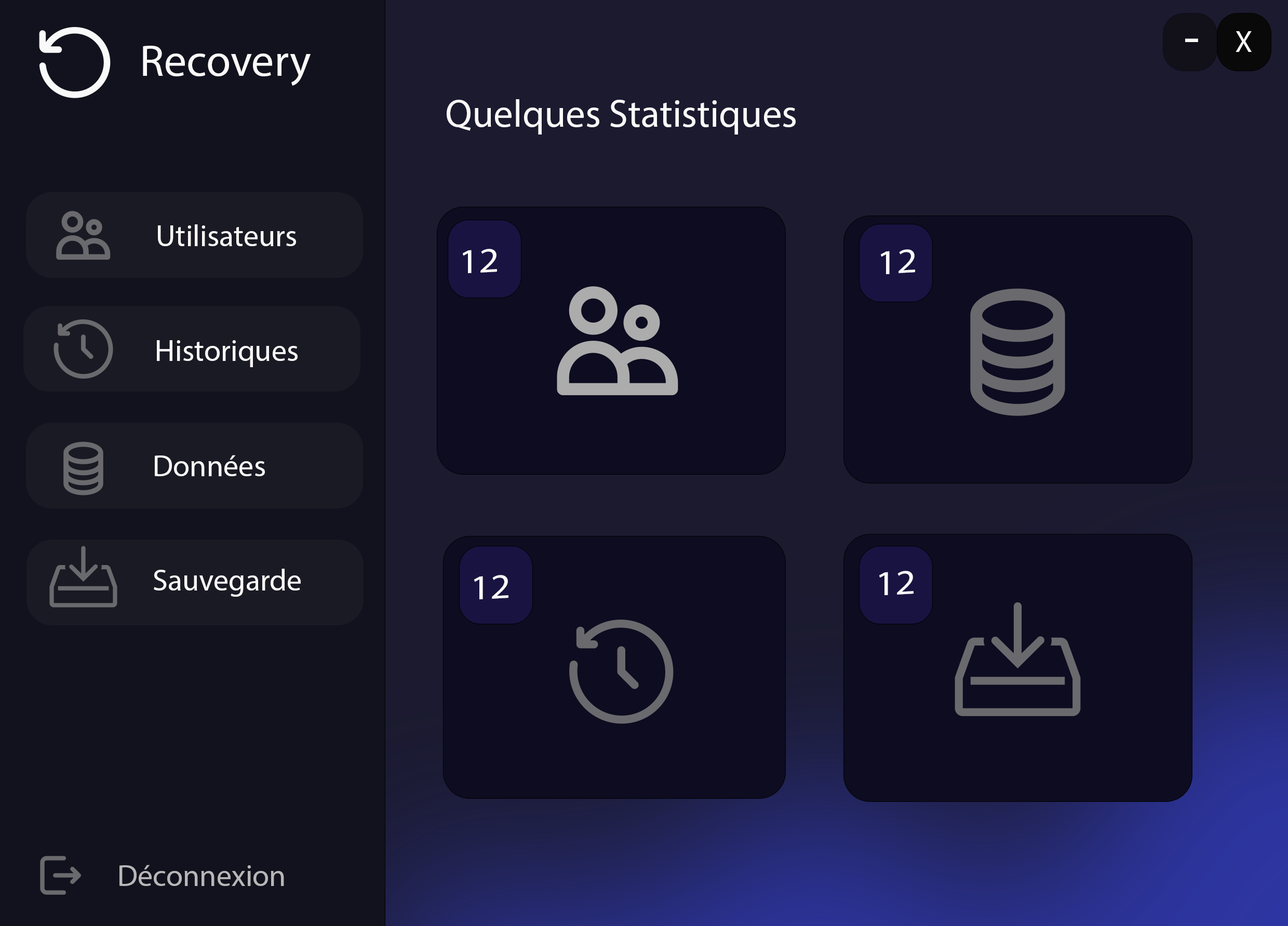
<style>
.page{position:relative;width:1288px;height:926px;background:#0d0c20}
.page>*{position:absolute;margin:0}
.t1{font:51.9px "MyriadPro-Regular";color:#fcf9f9}
.t2{font:30.3px "MyriadPro-Regular";color:#fcf9f9}
.t3{font:44.8px "MyriadPro-Regular";color:#fcf9f9}
.t4{font:38.9px "MyriadPro-Regular";color:#fcf9f9}
.t5{font:35px "MyriadPro-Regular";color:#fcf9f9;scale:1.13 1}
.t6{font:30.3px "MyriadPro-Regular";color:#b8b6b7}
</style>
<div class="page">
<p class="t1" style="left:1185px;top:38px;width:13px;height:4px">-</p>
<p class="t2" style="left:1235px;top:31px;width:17px;height:21px">X</p>
<p class="t3" style="left:143px;top:46px;width:168px;height:40px">Recovery</p>
<p class="t4" style="left:447px;top:99px;width:349px;height:35px">Quelques Statistiques</p>
<p class="t2" style="left:158px;top:224px;width:138px;height:22px">Utilisateurs</p>
<p class="t5" style="left:463px;top:249px;width:34px;height:24px;rotate:-3deg">12</p>
<p class="t5" style="left:881px;top:249px;width:34px;height:25px;rotate:-3deg">12</p>
<p class="t2" style="left:157px;top:340px;width:141px;height:27px">Historiques</p>
<p class="t2" style="left:155px;top:455px;width:110px;height:21px">Données</p>
<p class="t2" style="left:154px;top:569px;width:147px;height:28px">Sauvegarde</p>
<p class="t5" style="left:474px;top:575px;width:34px;height:24px;rotate:-3deg">12</p>
<p class="t5" style="left:879px;top:571px;width:34px;height:24px;rotate:-3deg">12</p>
<p class="t6" style="left:119px;top:865px;width:165px;height:21px">Déconnexion</p>
</div>
